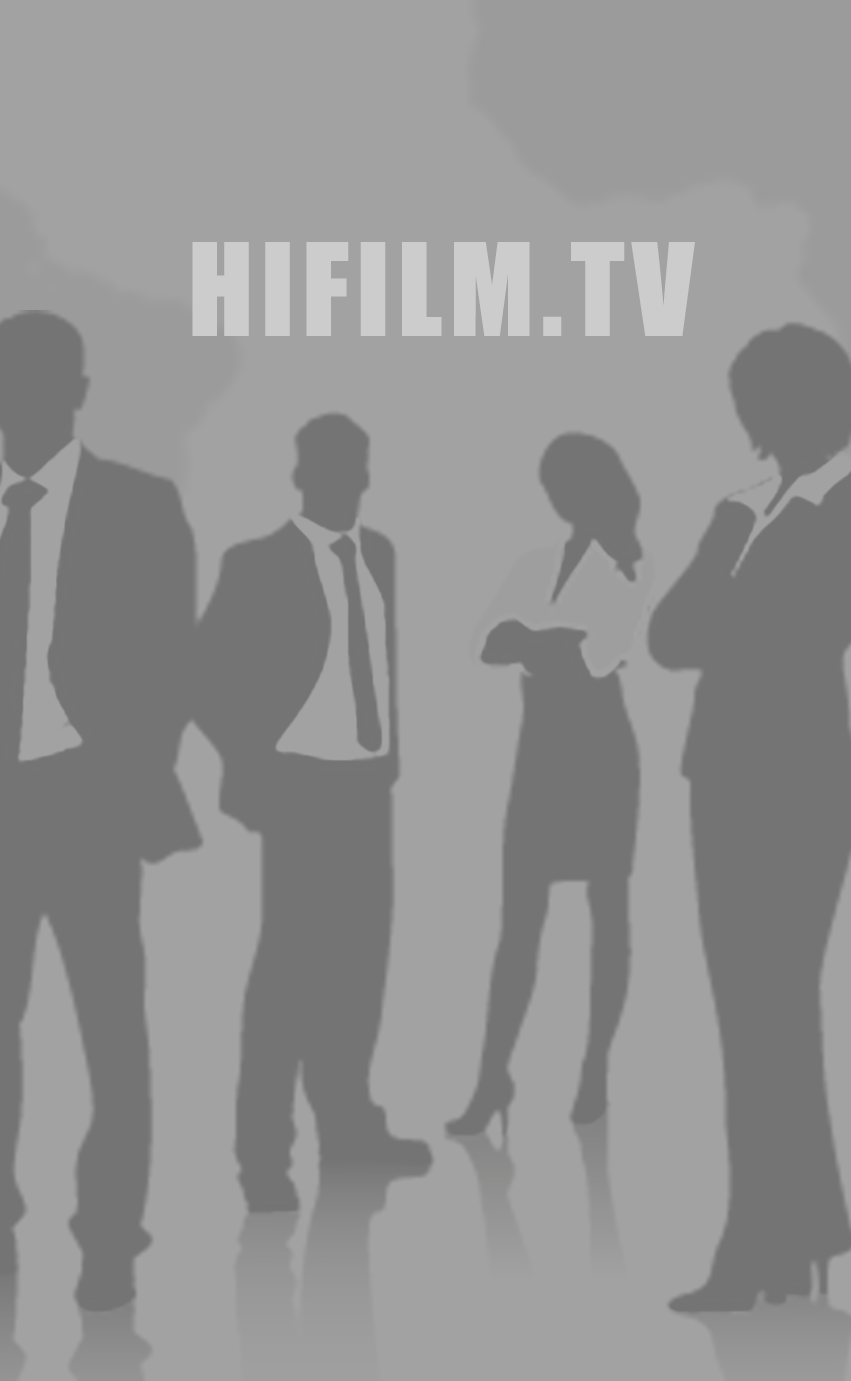
<style>
.page{position:relative;width:851px;height:1381px;background:#a2a2a2}
.page>*{position:absolute;margin:0}
.t1{font:118.4px "Impact";letter-spacing:0.06em;color:#cccccc;text-transform:uppercase}
</style>
<div class="page">
<p class="t1" style="left:192px;top:242px;width:503px;height:94px">HiFilm.tv</p>
</div>
